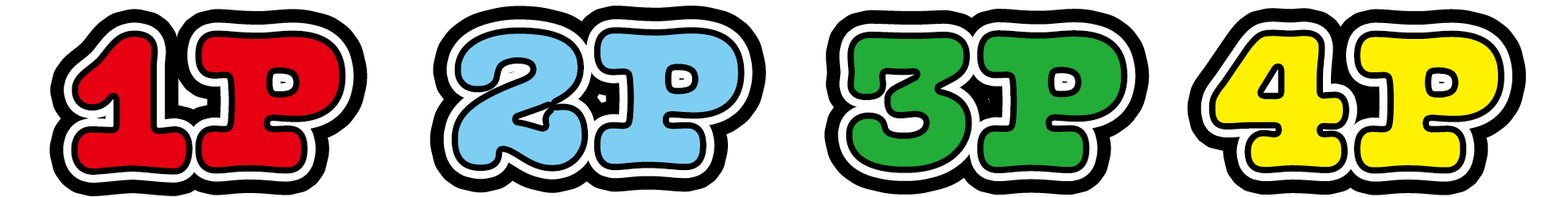
<style>
.page{position:relative;width:1568px;height:197px;background:#ffffff}
.page>*{position:absolute;margin:0}
.t1{font:198.9px "Olivita-Regular";color:#7ecef4;font-weight:bold}
.t2{font:198.9px "Olivita-Regular";color:#fff100;font-weight:bold}
.t3{font:198.9px "Olivita-Regular";color:#e60012;font-weight:bold}
.t4{font:198.9px "Olivita-Regular";color:#22ac38;font-weight:bold}
</style>
<div class="page">
<p class="t1" style="left:451px;top:27px;width:294px;height:145px">2P</p>
<p class="t2" style="left:1208px;top:29px;width:296px;height:145px">4P</p>
<p class="t3" style="left:71px;top:30px;width:275px;height:145px">1P</p>
<p class="t4" style="left:846px;top:30px;width:282px;height:143px">3P</p>
</div>
